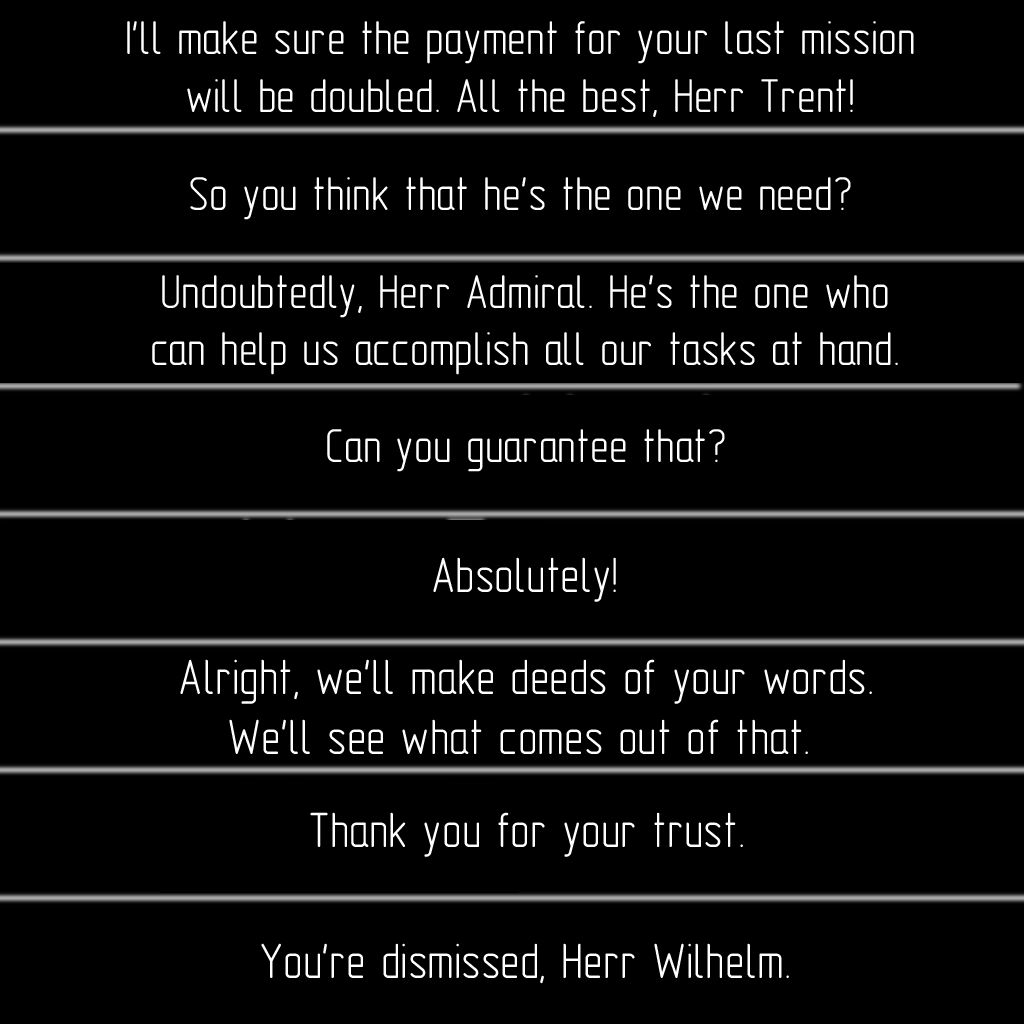
<style>
.page{position:relative;width:1024px;height:1024px;background:#000000}
.page>*{position:absolute;margin:0}
.t1{font:48px "GOST-2.304-81typeA";color:#ffffff}
.t2{font:50px "GOST-2.304-81typeA";color:#ffffff}
</style>
<div class="page">
<p class="t1" style="left:127px;top:21px;width:787px;height:96px;text-align:center">I'll make sure the payment for your last mission<br>will be doubled. All the best, Herr Trent!</p>
<p class="t1" style="left:190px;top:177px;width:661px;height:43px">So you think that he's the one we need?</p>
<p class="t1" style="left:152px;top:275px;width:746px;height:100px;text-align:center">Undoubtedly, Herr Admiral. He's the one who<br>can help us accomplish all our tasks at hand.</p>
<p class="t1" style="left:327px;top:429px;width:398px;height:43px">Can you guarantee that?</p>
<p class="t2" style="left:433px;top:557px;width:183px;height:45px">Absolutely!</p>
<p class="t2" style="left:180px;top:659px;width:692px;height:95px;text-align:center">Alright, we'll make deeds of your words.<br>We'll see what comes out of that.</p>
<p class="t2" style="left:310px;top:812px;width:433px;height:45px">Thank you for your trust.</p>
<p class="t2" style="left:261px;top:943px;width:528px;height:41px">You're dismissed, Herr Wilhelm.</p>
</div>
